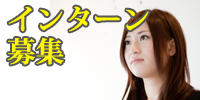
<style>
.page{position:relative;width:200px;height:100px;background:#ffffff}
.page>*{position:absolute;margin:0}
.t1{font:28px/32px "KozMinPr6N-Bold";color:#fff600;font-weight:bold}
</style>
<div class="page">
<p class="t1" style="left:7px;top:6px;width:142px;height:59px">インターン<br>募集</p>
</div>
